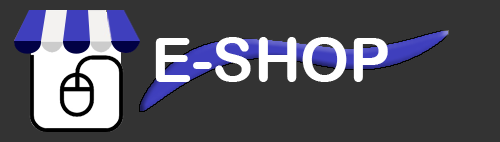
<style>
.page{position:relative;width:500px;height:142px;background:#333333}
.page>*{position:absolute;margin:0}
.t1{font:61.8px "ArialRoundedMTBold";color:#ffffff}
</style>
<div class="page">
<p class="t1" style="left:155px;top:37px;width:233px;height:45px">E-SHOP</p>
</div>
